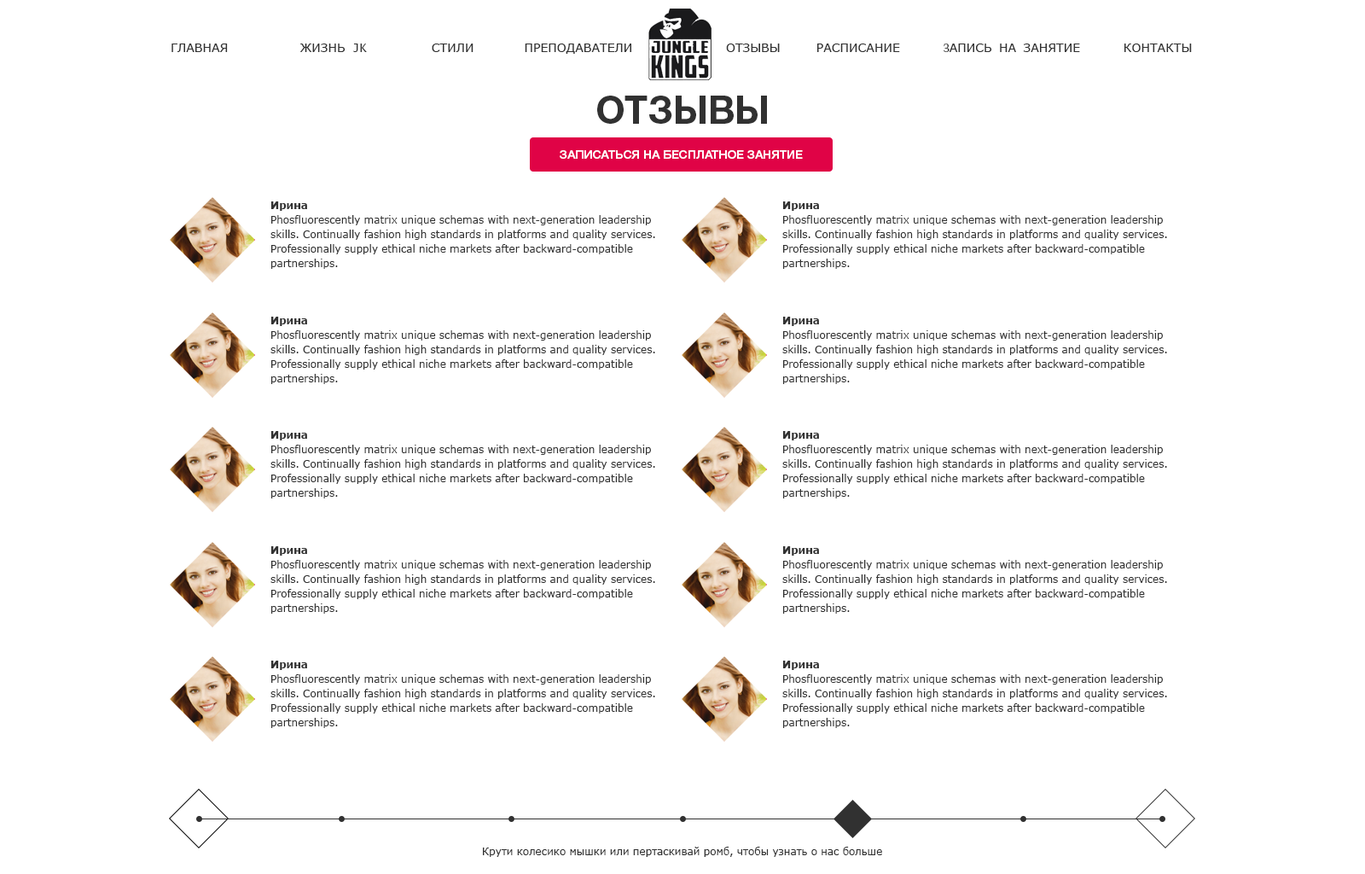
<style>
.page{position:relative;width:1365px;height:874px;background:#ffffff}
.page>*{position:absolute;margin:0}
.t1{font:11.9px "Verdana";color:#313131;text-transform:uppercase}
.t2{font:11.9px "LucidaSans-Typewriter";color:#313131;text-transform:uppercase}
.t3{font:11.9px "MinionPro-Regular";color:#313131;text-transform:uppercase}
.t4{font:38.4px "HelveticaNeueCyr-Bold";color:#313131}
.t5{font:11.9px "HelveticaNeueCyr-Medium";color:#ffffff}
.t6{font:10.2px/14.5px "Verdana";color:#313131}
.t7{font:10.2px/17.1px "Verdana-Bold";color:#313131}
.t8{font:10.2px "Verdana";color:#313131}
</style>
<div class="page">
<p class="t1" style="left:171px;top:44px;width:1021px;height:10px">главная          жизнь<span class="t2"> jk         </span>стили       преподаватели             отзывы     расписание      <span class="t3">з</span>апись на занятие      контакты</p>
<p class="t4" style="left:597px;top:96px;width:170px;height:28px">ОТЗЫВЫ</p>
<p class="t5" style="left:560px;top:150px;width:243px;height:9px">ЗАПИСАТЬСЯ НА БЕСПЛАТНОЕ ЗАНЯТИЕ</p>
<p class="t6" style="left:270px;top:201px;width:385px;height:68px"><span class="t7">Ирина<br></span>Phosfluorescently matrix unique schemas with next-generation leadership <br>skills. Continually fashion high standards in platforms and quality services. <br>Professionally supply ethical niche markets after backward-compatible <br>partnerships.</p>
<p class="t6" style="left:782px;top:201px;width:385px;height:68px"><span class="t7">Ирина<br></span>Phosfluorescently matrix unique schemas with next-generation leadership <br>skills. Continually fashion high standards in platforms and quality services. <br>Professionally supply ethical niche markets after backward-compatible <br>partnerships.</p>
<p class="t6" style="left:270px;top:317px;width:385px;height:67px"><span class="t7">Ирина<br></span>Phosfluorescently matrix unique schemas with next-generation leadership <br>skills. Continually fashion high standards in platforms and quality services. <br>Professionally supply ethical niche markets after backward-compatible <br>partnerships.</p>
<p class="t6" style="left:782px;top:317px;width:385px;height:67px"><span class="t7">Ирина<br></span>Phosfluorescently matrix unique schemas with next-generation leadership <br>skills. Continually fashion high standards in platforms and quality services. <br>Professionally supply ethical niche markets after backward-compatible <br>partnerships.</p>
<p class="t6" style="left:270px;top:431px;width:385px;height:67px"><span class="t7">Ирина<br></span>Phosfluorescently matrix unique schemas with next-generation leadership <br>skills. Continually fashion high standards in platforms and quality services. <br>Professionally supply ethical niche markets after backward-compatible <br>partnerships.</p>
<p class="t6" style="left:782px;top:431px;width:385px;height:67px"><span class="t7">Ирина<br></span>Phosfluorescently matrix unique schemas with next-generation leadership <br>skills. Continually fashion high standards in platforms and quality services. <br>Professionally supply ethical niche markets after backward-compatible <br>partnerships.</p>
<p class="t6" style="left:270px;top:546px;width:385px;height:67px"><span class="t7">Ирина<br></span>Phosfluorescently matrix unique schemas with next-generation leadership <br>skills. Continually fashion high standards in platforms and quality services. <br>Professionally supply ethical niche markets after backward-compatible <br>partnerships.</p>
<p class="t6" style="left:782px;top:546px;width:385px;height:67px"><span class="t7">Ирина<br></span>Phosfluorescently matrix unique schemas with next-generation leadership <br>skills. Continually fashion high standards in platforms and quality services. <br>Professionally supply ethical niche markets after backward-compatible <br>partnerships.</p>
<p class="t6" style="left:270px;top:660px;width:385px;height:68px"><span class="t7">Ирина<br></span>Phosfluorescently matrix unique schemas with next-generation leadership <br>skills. Continually fashion high standards in platforms and quality services. <br>Professionally supply ethical niche markets after backward-compatible <br>partnerships.</p>
<p class="t6" style="left:782px;top:660px;width:385px;height:68px"><span class="t7">Ирина<br></span>Phosfluorescently matrix unique schemas with next-generation leadership <br>skills. Continually fashion high standards in platforms and quality services. <br>Professionally supply ethical niche markets after backward-compatible <br>partnerships.</p>
<p class="t8" style="left:483px;top:846px;width:399px;height:11px">Крути колесико мышки или пертаскивай ромб, чтобы узнать о нас больше</p>
</div>
